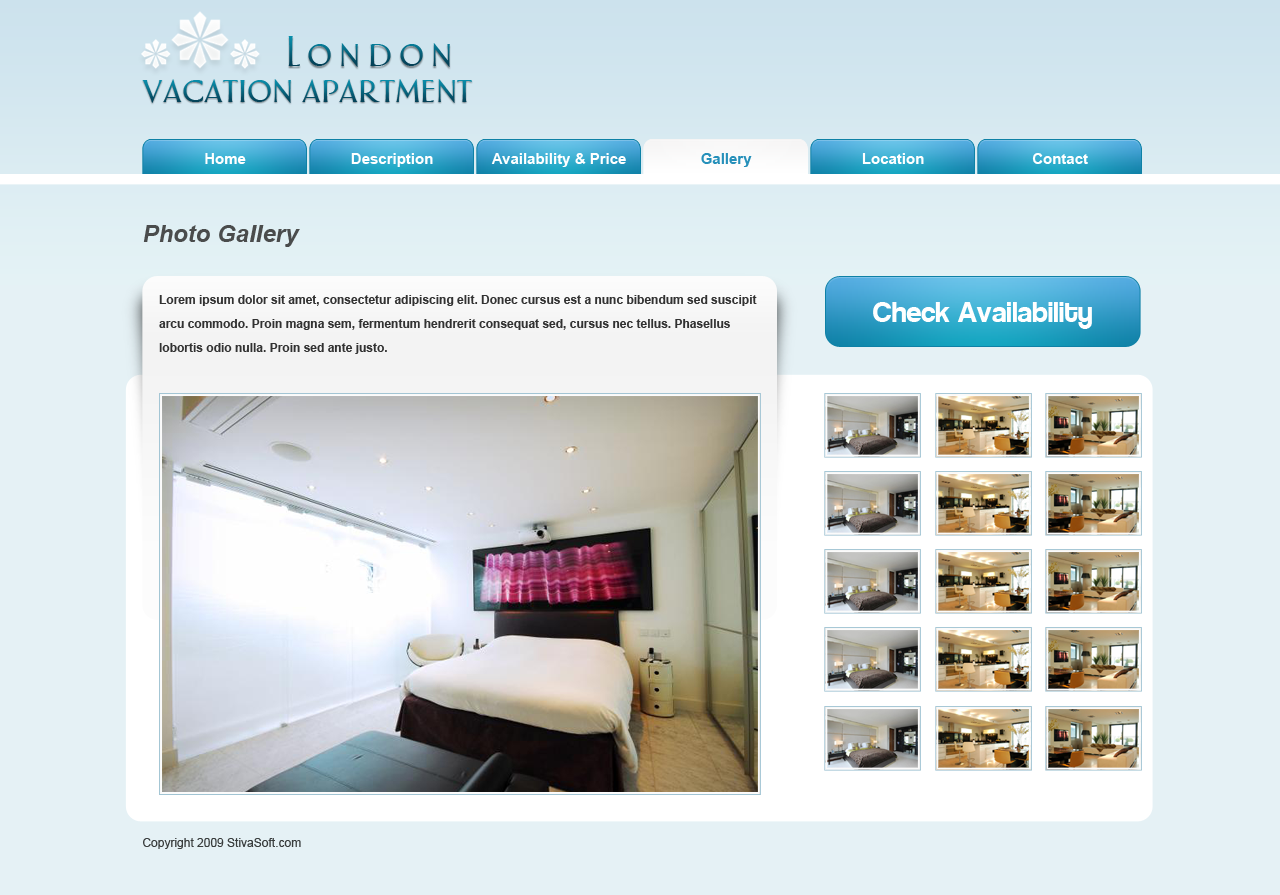
<style>
.page{position:relative;width:1280px;height:895px;background:#e5f1f5}
.page>*{position:absolute;margin:0}
.t1{font:36px "AphasiaBT-Roman";letter-spacing:0.2em}
.t2{font:36px "AphasiaBT-Roman"}
.t3{font:15px "Arial-BoldMT";color:#ffffff}
.t4{font:15px "Arial-BoldMT";color:#2690ba}
.t5{font:24px "Arial-BoldItalicMT";color:#4a4c4c}
.t6{font:12px/24px "Arial-BoldMT";color:#323232}
.t7{font:28px "Coolvetica";color:#ffffff}
.t8{font:12px "ArialMT";color:#393d3d}
</style>
<div class="page">
<p class="t1" style="left:288px;top:36px;width:162px;height:31px">London</p>
<p class="t2" style="left:142px;top:79px;width:330px;height:24px">vacation apartment</p>
<p class="t3" style="left:205px;top:153px;width:41px;height:11px">Home</p>
<p class="t3" style="left:351px;top:153px;width:82px;height:14px">Description</p>
<p class="t3" style="left:491px;top:153px;width:135px;height:14px">Availability &amp; Price</p>
<p class="t4" style="left:701px;top:153px;width:51px;height:14px">Gallery</p>
<p class="t3" style="left:862px;top:153px;width:62px;height:11px">Location</p>
<p class="t3" style="left:1032px;top:153px;width:56px;height:11px">Contact</p>
<p class="t5" style="left:143px;top:225px;width:157px;height:22px">Photo Gallery</p>
<p class="t6" style="left:159px;top:295px;width:598px;height:59px">Lorem ipsum dolor sit amet, consectetur adipiscing elit. Donec cursus est a nunc bibendum sed suscipit arcu commodo. Proin magna sem, fermentum hendrerit consequat sed, cursus nec tellus. Phasellus lobortis odio nulla. Proin sed ante justo.</p>
<p class="t7" style="left:873px;top:302px;width:219px;height:27px">Check Availability</p>
<p class="t8" style="left:143px;top:838px;width:158px;height:11px">Copyright 2009 StivaSoft.com</p>
</div>
